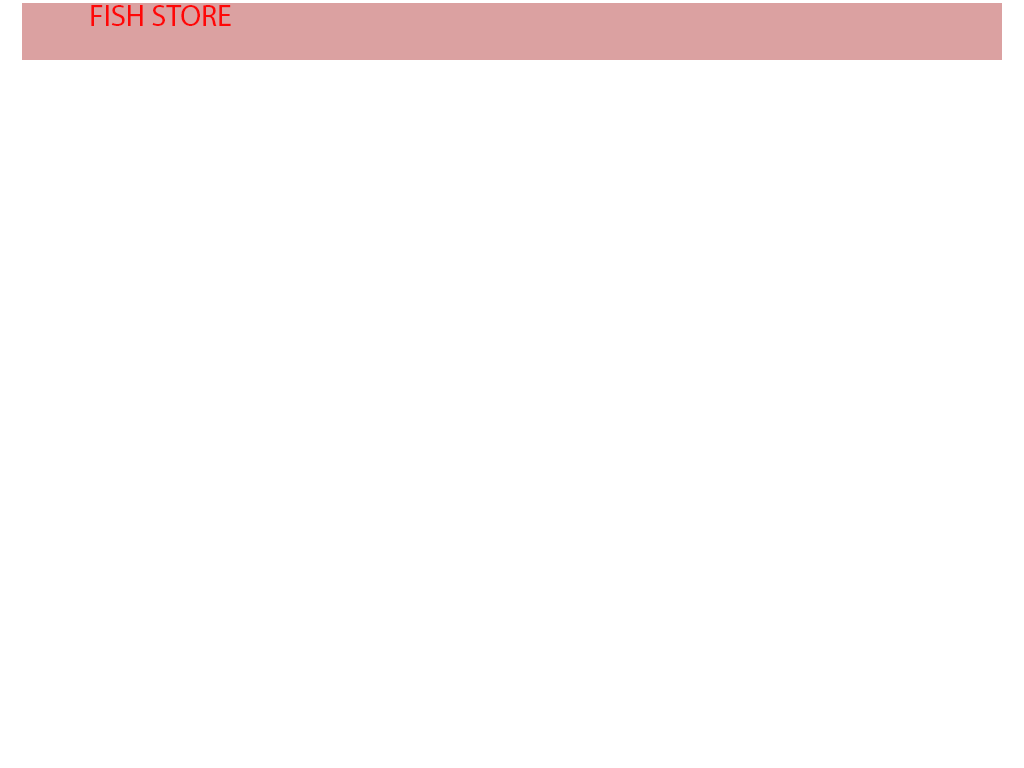
<style>
.page{position:relative;width:1024px;height:768px;background:#ffffff}
.page>*{position:absolute;margin:0}
.t1{font:30px "MyriadPro-Regular";color:#fe0707}
</style>
<div class="page">
<p class="t1" style="left:91px;top:5px;width:140px;height:21px">FISH STORE</p>
</div>
